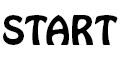
<style>
.page{position:relative;width:120px;height:60px;background:#ffffff}
.page>*{position:absolute;margin:0}
.t1{font:36px "HoboStd";color:#000000}
</style>
<div class="page">
<p class="t1" style="left:3px;top:15px;width:115px;height:30px">START</p>
</div>
